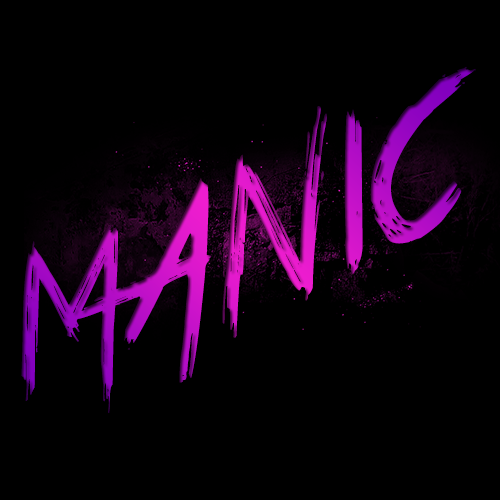
<style>
.page{position:relative;width:500px;height:500px;background:#000000}
.page>*{position:absolute;margin:0}
.t1{font:200px "TrueLies";letter-spacing:-0.01em}
</style>
<div class="page">
<p class="t1" style="left:21px;top:66px;width:455px;height:348px;rotate:-23deg">manic</p>
</div>
